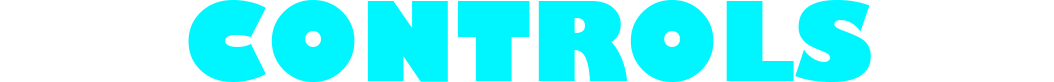
<style>
.page{position:relative;width:1054px;height:82px;background:#ffffff}
.page>*{position:absolute;margin:0}
.t1{font:108.3px "GillSans-UltraBold";color:#00f6ff}
</style>
<div class="page">
<p class="t1" style="left:188px;top:0px;width:683px;height:82px">CONTROLS</p>
</div>
